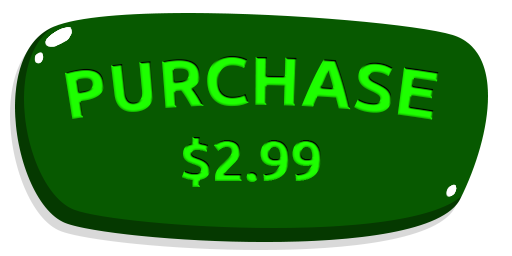
<style>
.page{position:relative;width:512px;height:256px;background:#075900}
.page>*{position:absolute;margin:0}
.t1{font:68.2px "Ubuntu-Bold";color:#1eff00}
.t2{font:57.1px "Ubuntu-Bold";color:#1eff00}
</style>
<div class="page">
<p class="t1" style="left:65px;top:55px;width:374px;height:65px">PURCHASE</p>
<p class="t2" style="left:182px;top:137px;width:139px;height:50px">$2.99</p>
</div>
